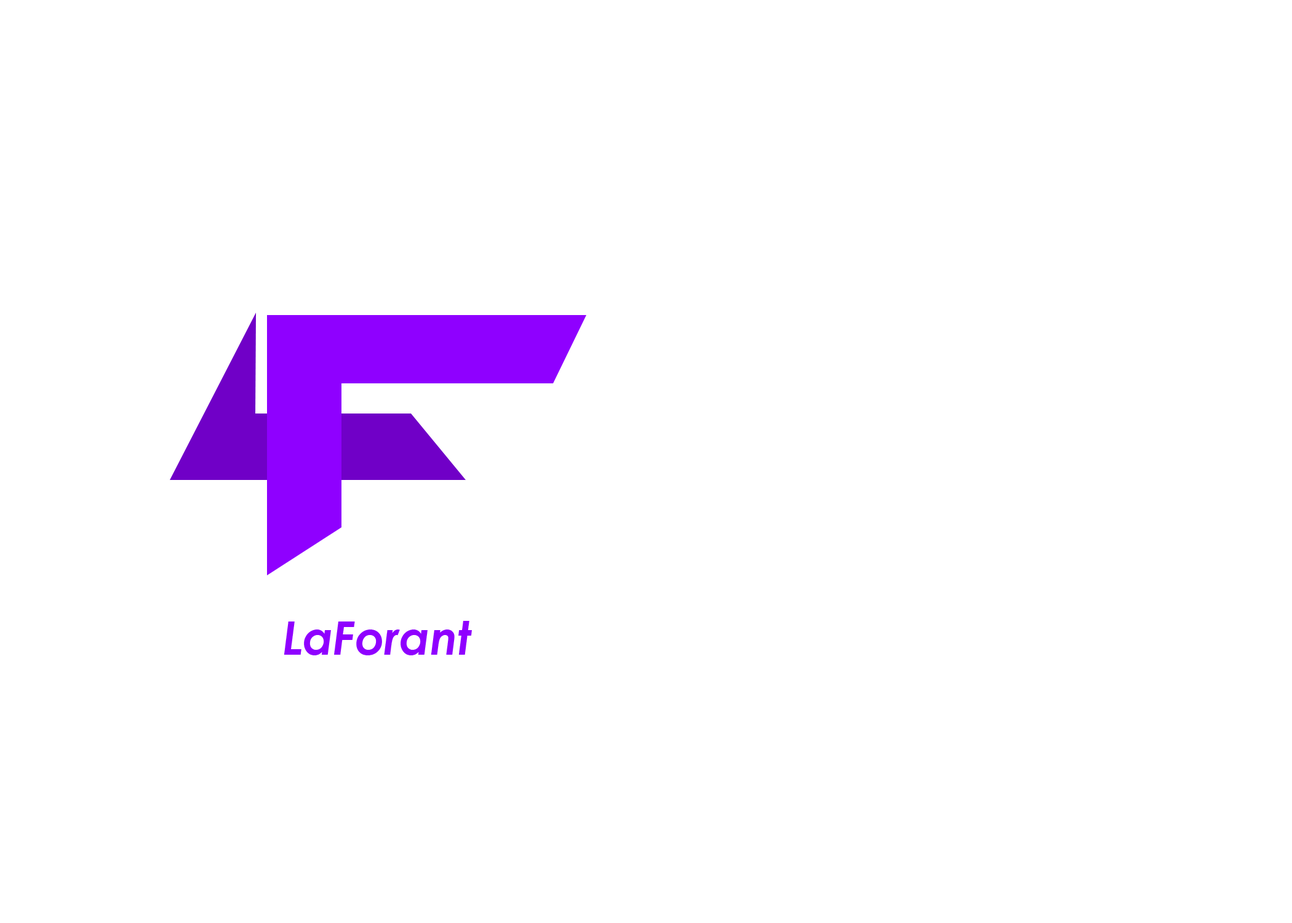
<style>
.page{position:relative;width:1292px;height:923px;background:#ffffff}
.page>*{position:absolute;margin:0}
.t1{font:46.1px "CenturyGothic-BoldItalic";color:#8f00ff}
</style>
<div class="page">
<p class="t1" style="left:284px;top:621px;width:188px;height:34px">LaForant</p>
</div>
